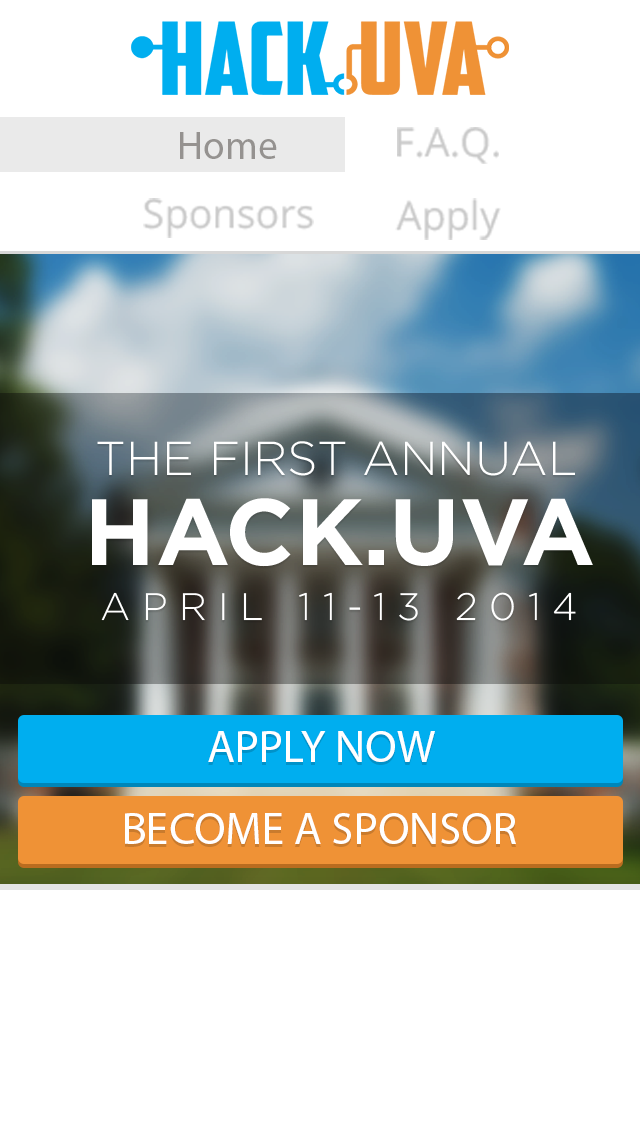
<style>
.page{position:relative;width:640px;height:1136px;background:#ffffff}
.page>*{position:absolute;margin:0}
.t1{font:39.7px "MyriadPro-Regular";color:#959290}
.t2{font:39.7px "OpenSans";color:#b4b4b4}
.t3{font:47.6px "Gotham-Light";color:#ffffff;text-transform:uppercase}
.t4{font:93.8px "Gotham-Bold";color:#ffffff;text-transform:uppercase}
.t5{font:38.3px "Gotham-Light";letter-spacing:0.3em;color:#ffffff;text-transform:uppercase}
.t6{font:45.6px "MyriadPro-Regular";color:#ffffff;text-transform:uppercase}
.t7{font:45.4px "MyriadPro-Regular";color:#ffffff;text-transform:uppercase}
</style>
<div class="page">
<p class="t1" style="left:180px;top:132px;width:97px;height:27px">Home</p>
<p class="t2" style="left:397px;top:127px;width:102px;height:37px;opacity:0.7">F.A.Q.</p>
<p class="t2" style="left:143px;top:198px;width:171px;height:40px;opacity:0.7">Sponsors</p>
<p class="t2" style="left:395px;top:198px;width:106px;height:42px;opacity:0.7">Apply</p>
<p class="t3" style="left:97px;top:441px;width:478px;height:35px">The First Annual</p>
<p class="t4" style="left:92px;top:498px;width:501px;height:69px">Hack.uva</p>
<p class="t5" style="left:101px;top:592px;width:475px;height:29px">APRIL 11-13 2014</p>
<p class="t6" style="left:208px;top:731px;width:227px;height:31px">Apply Now</p>
<p class="t7" style="left:125px;top:813px;width:391px;height:31px">BECOME A SPONSOR</p>
</div>
